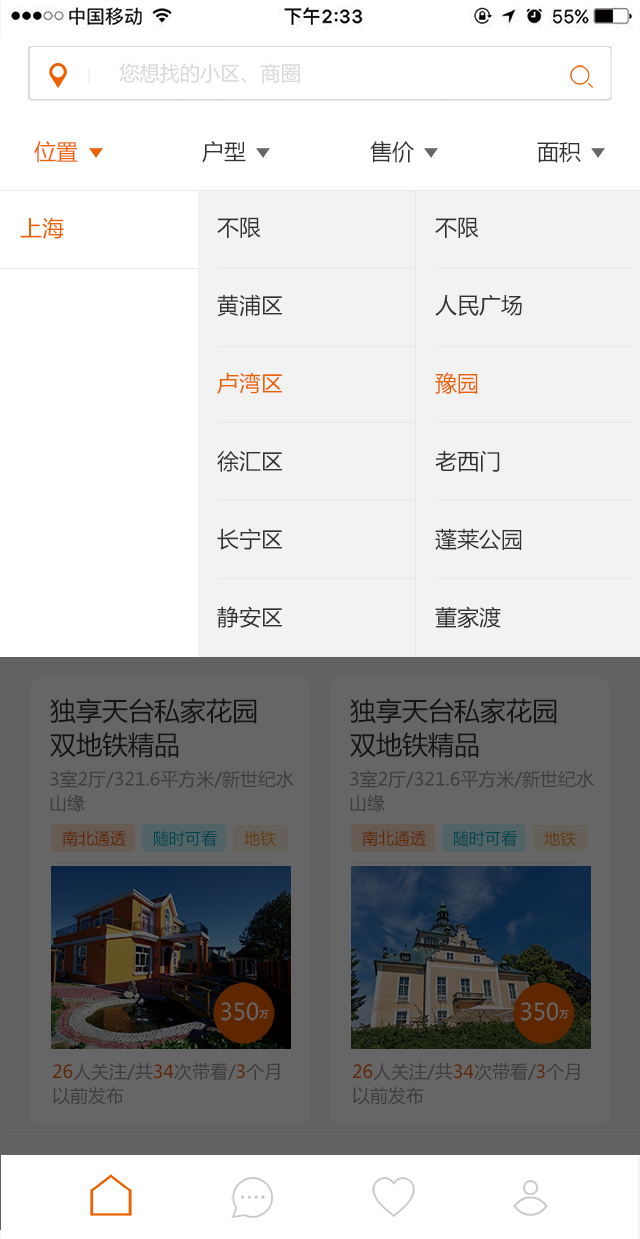
<style>
.page{position:relative;width:640px;height:1239px;background:#ffffff}
.page>*{position:absolute;margin:0}
.t1{font:22px "MicrosoftYaHei";color:#ec6100}
.t2{font:22px "MicrosoftYaHei";color:#333333}
.t3{font:22px/78px "MicrosoftYaHei";color:#333333}
.t4{font:22px/78px "MicrosoftYaHei";color:#eb6100}
.t5{font:26px/34px "MicrosoftYaHei";color:#141414}
.t6{font:18px/24px "MicrosoftYaHei";color:#3d3d3d}
.t7{font:16px "MicrosoftYaHei";color:#5e2700}
.t8{font:16px "MicrosoftYaHei";color:#00454e}
.t9{font:16px "MicrosoftYaHei";color:#603e0d}
</style>
<div class="page">
<p class="t1" style="left:34px;top:141px;width:44px;height:22px">位置</p>
<p class="t2" style="left:202px;top:141px;width:44px;height:22px">户型</p>
<p class="t2" style="left:370px;top:141px;width:44px;height:22px">售价</p>
<p class="t2" style="left:537px;top:142px;width:44px;height:21px">面积</p>
<p class="t1" style="left:20px;top:217px;width:44px;height:22px">上海</p>
<p class="t3" style="left:217px;top:217px;width:65px;height:411px">不限<br>黄浦区<br><span class="t4">卢湾区<br></span>徐汇区<br>长宁区<br>静安区</p>
<p class="t3" style="left:435px;top:217px;width:87px;height:411px">不限<br>人民广场<br><span class="t4">豫园<br></span>老西门<br>蓬莱公园<br>董家渡</p>
<p class="t5" style="left:50px;top:698px;width:207px;height:60px">独享天台私家花园<br>双地铁精品</p>
<p class="t5" style="left:350px;top:698px;width:207px;height:60px">独享天台私家花园<br>双地铁精品</p>
<p class="t6" style="left:50px;top:770px;width:244px;height:42px">3室2厅/321.6平方米/新世纪水<br>山缘</p>
<p class="t6" style="left:350px;top:770px;width:244px;height:42px">3室2厅/321.6平方米/新世纪水<br>山缘</p>
<p class="t7" style="left:62px;top:830px;width:64px;height:16px">南北通透</p>
<p class="t8" style="left:154px;top:830px;width:63px;height:17px">随时可看</p>
<p class="t9" style="left:244px;top:830px;width:32px;height:17px">地铁</p>
<p class="t7" style="left:362px;top:830px;width:64px;height:16px">南北通透</p>
<p class="t8" style="left:454px;top:830px;width:63px;height:17px">随时可看</p>
<p class="t9" style="left:544px;top:830px;width:32px;height:17px">地铁</p>
<p class="t6" style="left:53px;top:1063px;width:227px;height:42px">26人关注/共34次带看/3个月<br>以前发布</p>
<p class="t6" style="left:353px;top:1063px;width:227px;height:42px">26人关注/共34次带看/3个月<br>以前发布</p>
</div>
